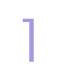
<style>
.page{position:relative;width:60px;height:80px;background:#ffffff}
.page>*{position:absolute;margin:0}
.t1{font:60px "Poppins-ExtraLight";color:#aa97e3;text-transform:uppercase;font-weight:bold}
</style>
<div class="page">
<p class="t1" style="left:22px;top:18px;width:12px;height:44px">1</p>
</div>
